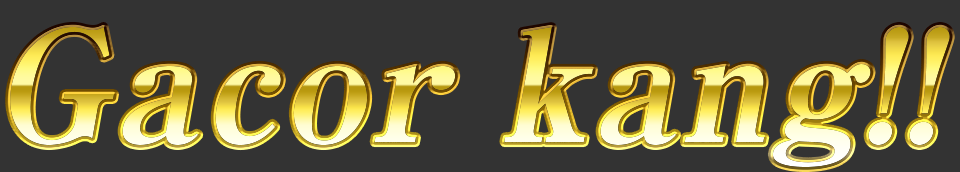
<style>
.page{position:relative;width:960px;height:172px;background:#333333}
.page>*{position:absolute;margin:0}
.t1{font:153.5px "RyuminPro-ExBold";letter-spacing:0.01em;font-style:italic}
</style>
<div class="page">
<p class="t1" style="left:10px;top:26px;width:940px;height:141px">Gacor kang!!</p>
</div>
